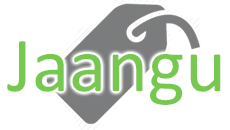
<style>
.page{position:relative;width:230px;height:130px;background:#ffffff}
.page>*{position:absolute;margin:0}
.t1{font:78.3px "Calibri";color:#77c84e}
</style>
<div class="page">
<p class="t1" style="left:7px;top:41px;width:214px;height:64px">Jaangu</p>
</div>
